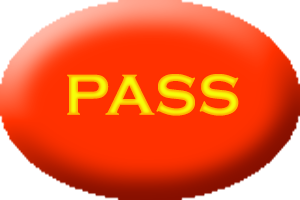
<style>
.page{position:relative;width:300px;height:200px;background:#ff3100}
.page>*{position:absolute;margin:0}
.t1{font:60px "CopperplateGothic-Bold"}
</style>
<div class="page">
<p class="t1" style="left:67px;top:74px;width:172px;height:42px">PASS</p>
</div>
